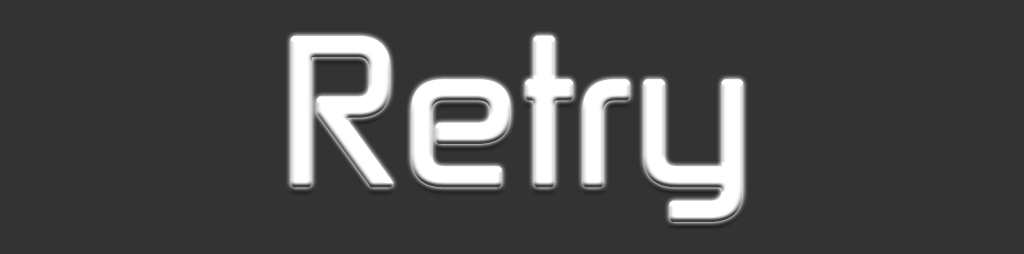
<style>
.page{position:relative;width:1024px;height:254px;background:#333333}
.page>*{position:absolute;margin:0}
.t1{font:200px "ZektonRg-Regular";color:#ffffff;font-weight:bold}
</style>
<div class="page">
<p class="t1" style="left:290px;top:35px;width:453px;height:187px">Retry</p>
</div>
